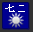
<style>
.page{position:relative;width:33px;height:32px;background:#000090}
.page>*{position:absolute;margin:0}
.t1{font:10.4px "SimSun";color:#ffffff}
</style>
<div class="page">
<p class="t1" style="left:5px;top:4px;width:20px;height:8px">七二</p>
</div>
